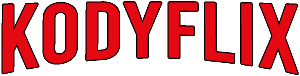
<style>
.page{position:relative;width:300px;height:76px;background:#ffffff}
.page>*{position:absolute;margin:0}
.t1{font:96.1px "Bebas-Regular";color:#e50914}
</style>
<div class="page">
<p class="t1" style="left:2px;top:2px;width:296px;height:72px">kodyflix</p>
</div>
